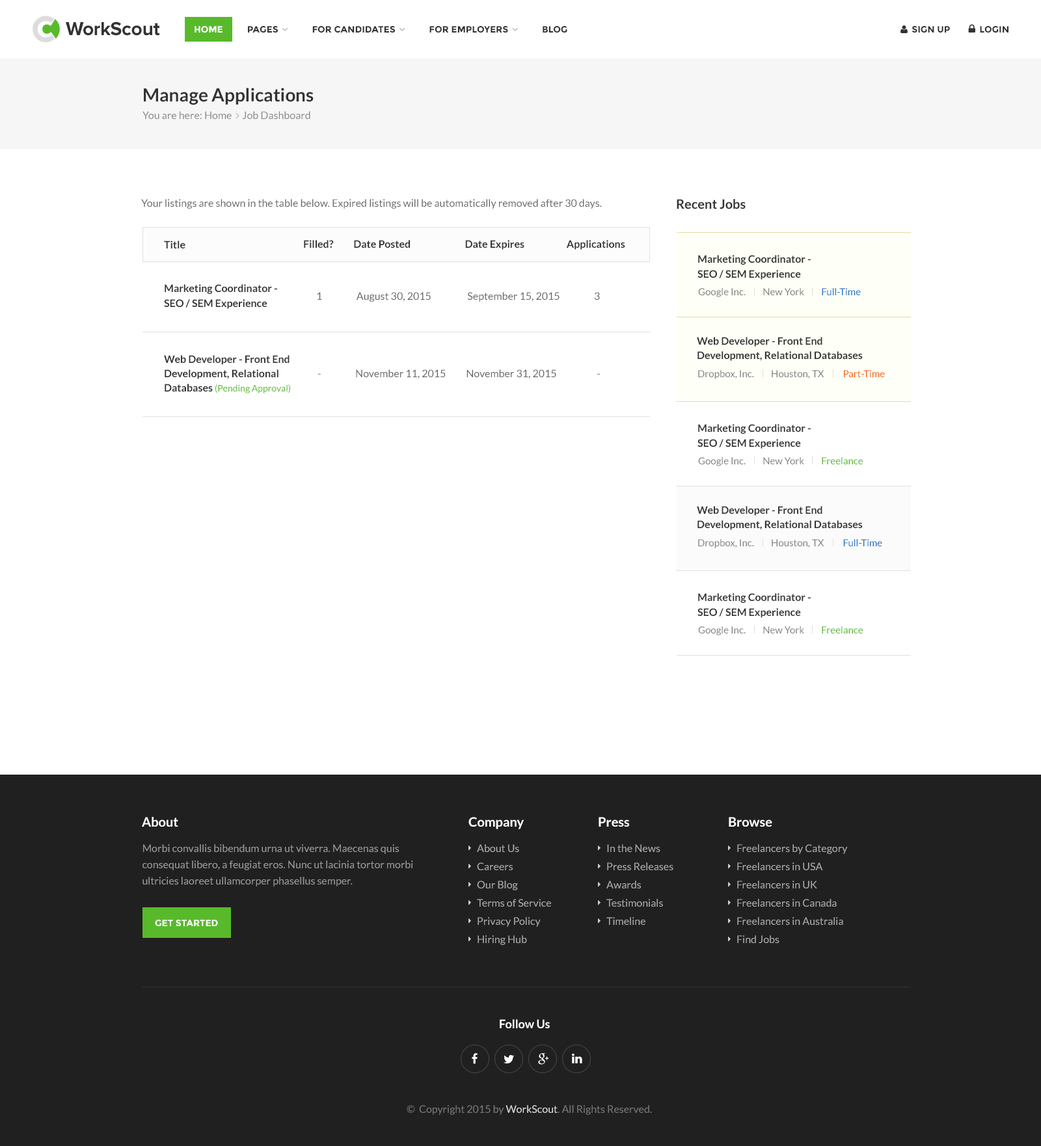
<style>
.page{position:relative;width:1041px;height:1146px;background:#ffffff}
.page>*{position:absolute;margin:0}
.t1{font:19.5px "ProximaNova-Bold";letter-spacing:-0.015em;color:#323232}
.t2{font:10.4px "Lato-Regular";color:#666666}
.t3{font:13px "Lato-Bold";color:#333333}
.t4{font:10.4px "Lato-Bold";color:#333333}
.t5{font:10.4px/15px "Lato-Bold";color:#333333}
.t6{font:9.8px "Lato-Regular";color:#808080}
.t7{font:9.8px "Lato-Regular";color:#186fc9}
.t8{font:10.4px/14.3px "Lato-Bold";color:#333333}
.t9{font:9.1px/14.3px "Lato-Regular";color:#58ba2b}
.t10{font:9.8px "Lato-Regular";color:#f1630d}
.t11{font:9.8px "Lato-Regular";color:#58ba2b}
.t12{font:13px "Lato-Bold";color:#ffffff}
.t13{font:10.4px/16.3px "Lato-Regular";color:#999999}
.t14{font:10.4px/18.2px "Lato-Regular";color:#aaaaaa}
.t15{font:9.1px "Montserrat-Bold";color:#ffffff;text-transform:uppercase}
.t16{font:11.7px "Lato-Bold";color:#ffffff}
.t17{font:10.4px "Lato-Regular";color:#777777}
.t18{font:10.4px "Lato-Regular";color:#dddddd}
</style>
<div class="page">
<p class="t1" style="left:66px;top:21px;width:94px;height:15px">WorkScout</p>
<p class="t2" style="left:141px;top:199px;width:461px;height:10px">Your listings are shown in the table below. Expired listings will be automatically removed after 30 days.</p>
<p class="t3" style="left:676px;top:199px;width:69px;height:10px">Recent Jobs</p>
<p class="t4" style="left:164px;top:241px;width:21px;height:7px">Title</p>
<p class="t4" style="left:304px;top:240px;width:321px;height:10px">Filled?          Date Posted                           Date Expires                     Applications</p>
<p class="t5" style="left:697px;top:255px;width:113px;height:25px">Marketing Coordinator -<br>SEO / SEM Experience</p>
<p class="t5" style="left:164px;top:284px;width:113px;height:25px">Marketing Coordinator -<br>SEO / SEM Experience</p>
<p class="t2" style="left:317px;top:292px;width:283px;height:10px">1                 August 30, 2015                  September 15, 2015                 3</p>
<p class="t6" style="left:698px;top:288px;width:162px;height:9px">Google Inc.         New York         <span class="t7">Full-Time</span></p>
<p class="t8" style="left:697px;top:337px;width:165px;height:24px">Web Developer - Front End<br>Development, Relational Databases</p>
<p class="t8" style="left:164px;top:355px;width:126px;height:38px">Web Developer - Front End<br>Development, Relational<br>Databases <span class="t9">(Pending Approval)</span></p>
<p class="t2" style="left:317px;top:369px;width:283px;height:10px">-                 November 11, 2015          November 31, 2015                    -</p>
<p class="t6" style="left:698px;top:370px;width:186px;height:9px">Dropbox, Inc.         Houston, TX          <span class="t10">Part-Time</span></p>
<p class="t5" style="left:697px;top:424px;width:113px;height:25px">Marketing Coordinator -<br>SEO / SEM Experience</p>
<p class="t6" style="left:698px;top:457px;width:164px;height:9px">Google Inc.         New York         <span class="t11">Freelance</span></p>
<p class="t8" style="left:697px;top:506px;width:165px;height:24px">Web Developer - Front End<br>Development, Relational Databases</p>
<p class="t6" style="left:698px;top:539px;width:184px;height:9px">Dropbox, Inc.         Houston, TX          <span class="t7">Full-Time</span></p>
<p class="t5" style="left:697px;top:593px;width:113px;height:25px">Marketing Coordinator -<br>SEO / SEM Experience</p>
<p class="t6" style="left:698px;top:626px;width:164px;height:9px">Google Inc.         New York         <span class="t11">Freelance</span></p>
<p class="t12" style="left:142px;top:817px;width:36px;height:10px">About</p>
<p class="t12" style="left:468px;top:817px;width:56px;height:12px">Company</p>
<p class="t12" style="left:598px;top:817px;width:31px;height:10px">Press</p>
<p class="t12" style="left:728px;top:817px;width:44px;height:10px">Browse</p>
<p class="t13" style="left:142px;top:844px;width:271px;height:42px">Morbi convallis bibendum urna ut viverra. Maecenas quis <br>consequat libero, a feugiat eros. Nunc ut lacinia tortor morbi ultricies laoreet ullamcorper phasellus semper.</p>
<p class="t14" style="left:477px;top:844px;width:74px;height:101px">About Us<br>Careers<br>Our Blog<br>Terms of Service<br>Privacy Policy<br>Hiring Hub</p>
<p class="t14" style="left:606px;top:844px;width:67px;height:81px">In the News<br>Press Releases<br>Awards<br>Testimonials<br>Timeline</p>
<p class="t14" style="left:737px;top:844px;width:110px;height:99px">Freelancers by Category<br>Freelancers in USA<br>Freelancers in UK<br>Freelancers in Canada<br>Freelancers in Australia<br>Find Jobs</p>
<p class="t15" style="left:155px;top:920px;width:63px;height:6px">Get Started</p>
<p class="t16" style="left:499px;top:1019px;width:51px;height:9px">Follow Us</p>
<p class="t17" style="left:406px;top:1105px;width:246px;height:10px">©  Copyright 2015 by <span class="t18">WorkScout</span>. All Rights Reserved.</p>
</div>
